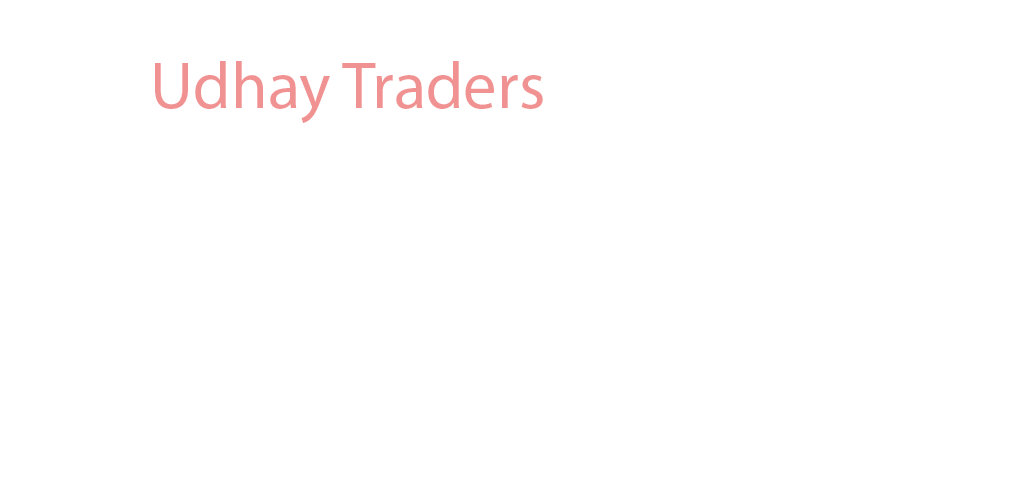
<style>
.page{position:relative;width:1024px;height:500px;background:#ffffff}
.page>*{position:absolute;margin:0}
.t1{font:66.7px "MyriadPro-Regular";color:#f19292}
</style>
<div class="page">
<p class="t1" style="left:155px;top:61px;width:388px;height:62px">Udhay Traders</p>
</div>
